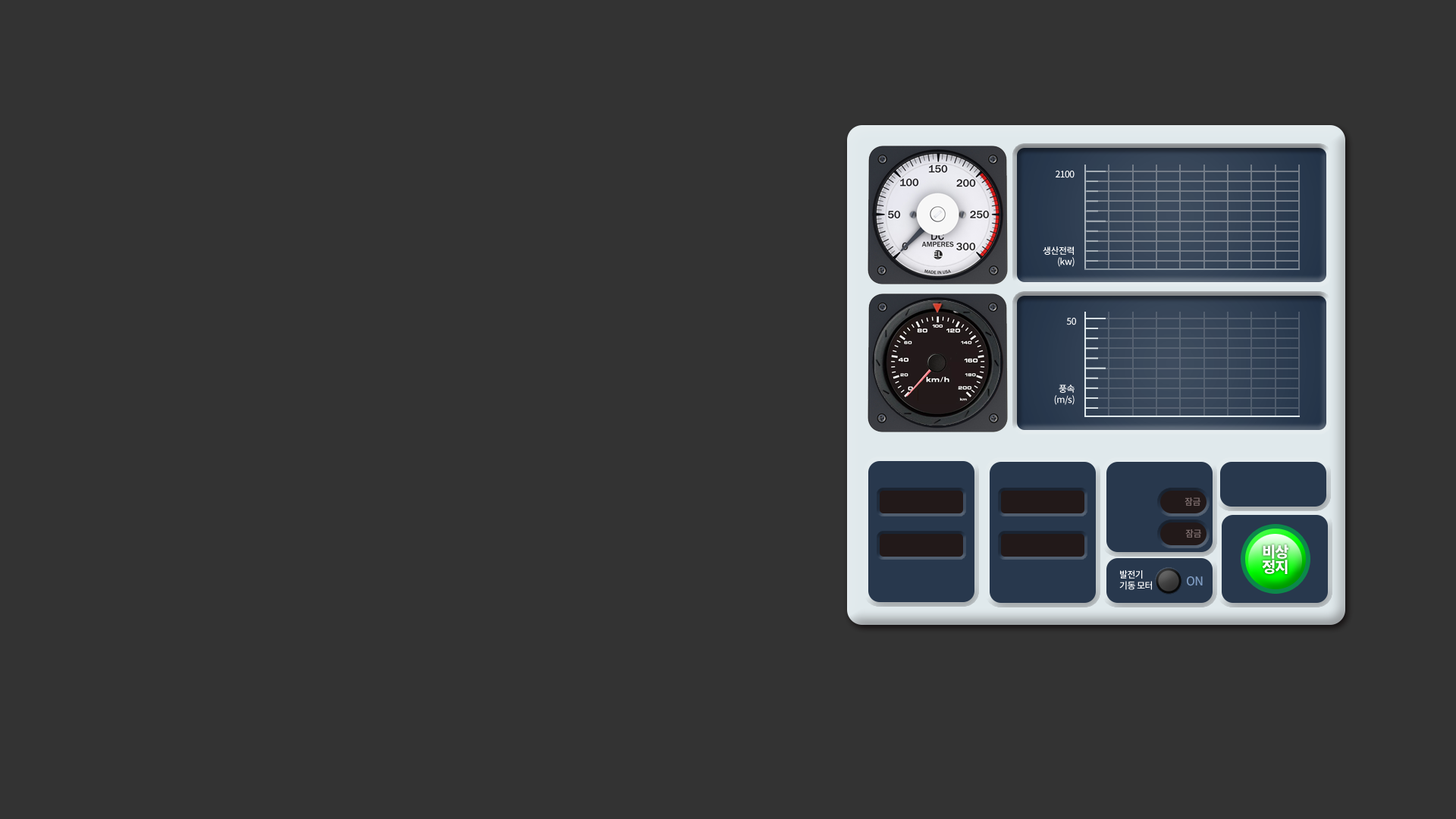
<style>
.page{position:relative;width:1456px;height:819px;background:#333333}
.page>*{position:absolute;margin:0}
.t1{font:9.1px "NotoSansKR-Medium";letter-spacing:-0.05em;color:#ffffff}
.t2{font:9.1px "NotoSansKR-Medium";letter-spacing:-0.05em;color:#857575}
.t3{font:15.2px/15.2px "NotoSansKR-Black";letter-spacing:-0.05em;color:#ffffff}
.t4{font:12.1px "NotoSansKR-Medium";letter-spacing:-0.05em;color:#7f9cc2}
</style>
<div class="page">
<p class="t1" style="left:1056px;top:171px;width:19px;height:7px">2100</p>
<p class="t1" style="left:1043px;top:246px;width:32px;height:21px;text-align:right">생산전력<br>(kw)</p>
<p class="t1" style="left:1066px;top:318px;width:10px;height:7px">50</p>
<p class="t1" style="left:1054px;top:384px;width:21px;height:21px;text-align:right">풍속<br>(m/s)</p>
<p class="t2" style="left:1185px;top:497px;width:15px;height:9px">잠금</p>
<p class="t2" style="left:1185px;top:529px;width:16px;height:9px">잠금</p>
<p class="t3" style="left:1262px;top:544px;width:26px;height:30px">비상<br>정지</p>
<p class="t1" style="left:1119px;top:570px;width:33px;height:20px">발전기<br>기동 모터</p>
<p class="t4" style="left:1187px;top:576px;width:16px;height:10px">ON</p>
</div>
